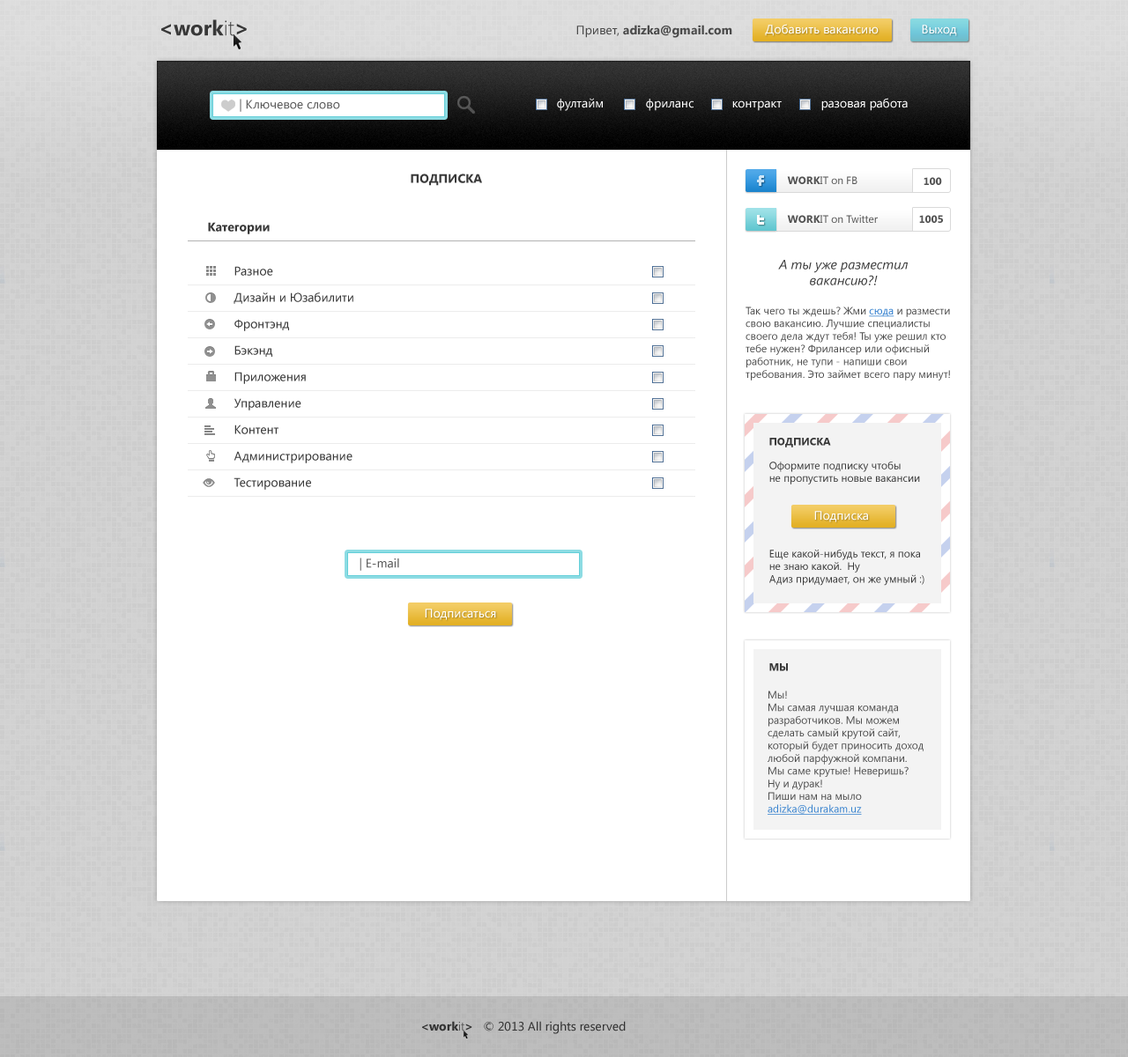
<style>
.page{position:relative;width:1128px;height:1057px;background:#ffffff}
.page>*{position:absolute;margin:0}
.t1{font:21.1px "SegoeUI-Bold";color:#383838}
.t2{font:21.1px "SegoeUI-Light";color:#383838}
.t3{font:12.3px "SegoeUI-Bold";color:#4a4a4a}
.t4{font:12.3px "SegoeUI";color:#4a4a4a}
.t5{font:12.3px "SegoeUI";color:#ffffff}
.t6{font:12.3px "SegoeUI";color:#5c5c5c}
.t7{font:12.3px "SegoeUI";color:#fdfdfd}
.t8{font:12.3px "SegoeUI-Bold";color:#393939}
.t9{font:10.6px "SegoeUI";color:#535353}
.t10{font:10.6px "SegoeUI-Bold";color:#535353}
.t11{font:12.3px "SegoeUI";color:#393939}
.t12{font:13.2px "SegoeUI-Italic";color:#3b3b3b}
.t13{font:10.6px "SegoeUI";color:#4d4d4d}
.t14{font:10.6px "SegoeUI";color:#2a7acc;text-decoration:underline}
.t15{font:10.6px "SegoeUI-Bold";color:#393939}
.t16{font:10.6px "SegoeUI";color:#393939}
.t17{font:10.6px "SegoeUI";color:#3681ce;text-decoration:underline}
.t18{font:12.3px "SegoeUI";color:#333333}
.t19{font:12.3px "SegoeUI-Bold";color:#333333}
.t20{font:12.3px "SegoeUI-Light";color:#333333}
</style>
<div class="page">
<p class="t1" style="left:161px;top:19px;width:86px;height:17px">&lt;work<span class="t2">it</span>&gt;</p>
<p class="t3" style="left:576px;top:25px;width:156px;height:13px"><span class="t4">Привет, </span>adizka@gmail.com</p>
<p class="t5" style="left:765px;top:24px;width:113px;height:12px">Добавить вакансию</p>
<p class="t5" style="left:922px;top:25px;width:35px;height:11px">Выход</p>
<p class="t6" style="left:240px;top:99px;width:100px;height:13px">| Ключевое слово</p>
<p class="t7" style="left:557px;top:98px;width:46px;height:13px">фултайм</p>
<p class="t7" style="left:646px;top:99px;width:47px;height:12px">фриланс</p>
<p class="t7" style="left:732px;top:100px;width:50px;height:11px">контракт</p>
<p class="t7" style="left:821px;top:98px;width:87px;height:13px">разовая работа</p>
<p class="t8" style="left:411px;top:174px;width:71px;height:12px">ПОДПИСКА</p>
<p class="t9" style="left:787px;top:176px;width:70px;height:8px"><span class="t10">WORK</span>IT on FB</p>
<p class="t10" style="left:923px;top:177px;width:19px;height:8px">100</p>
<p class="t9" style="left:787px;top:215px;width:91px;height:8px"><span class="t10">WORK</span>IT on Twitter</p>
<p class="t10" style="left:919px;top:215px;width:24px;height:8px">1005</p>
<p class="t8" style="left:208px;top:222px;width:62px;height:12px">Категории</p>
<p class="t11" style="left:234px;top:266px;width:39px;height:10px">Разное</p>
<p class="t12" style="left:778px;top:260px;width:130px;height:25px;text-align:center">А ты уже разместил<br>вакансию?!</p>
<p class="t11" style="left:233px;top:293px;width:120px;height:11px">Дизайн и Юзабилити</p>
<p class="t13" style="left:745px;top:307px;width:205px;height:74px">Так чего ты ждешь? Жми <span class="t14">сюда</span> и размести свою вакансию. Лучшие специалисты своего дела ждут тебя! Ты уже решил кто тебе нужен? Фрилансер или офисный работник, не тупи - напиши свои требования. Это займет всего пару минут!</p>
<p class="t11" style="left:234px;top:319px;width:55px;height:12px">Фронтэнд</p>
<p class="t11" style="left:234px;top:345px;width:38px;height:12px">Бэкэнд</p>
<p class="t11" style="left:234px;top:372px;width:72px;height:12px">Приложения</p>
<p class="t11" style="left:234px;top:398px;width:67px;height:13px">Управление</p>
<p class="t11" style="left:234px;top:425px;width:44px;height:9px">Контент</p>
<p class="t15" style="left:769px;top:438px;width:62px;height:10px">ПОДПИСКА</p>
<p class="t11" style="left:233px;top:451px;width:119px;height:12px">Администрирование</p>
<p class="t16" style="left:769px;top:461px;width:151px;height:24px">Оформите подписку чтобы <br>не пропустить новые вакансии</p>
<p class="t11" style="left:233px;top:478px;width:78px;height:12px">Тестирование</p>
<p class="t5" style="left:814px;top:511px;width:54px;height:11px">Подписка</p>
<p class="t6" style="left:359px;top:558px;width:40px;height:13px">| E-mail</p>
<p class="t16" style="left:769px;top:549px;width:155px;height:37px">Еще какой-нибудь текст, я пока<br>не знаю какой.  Ну <br>Адиз придумает, он же умный :)</p>
<p class="t5" style="left:425px;top:609px;width:71px;height:11px">Подписаться</p>
<p class="t15" style="left:769px;top:663px;width:19px;height:8px">МЫ</p>
<p class="t13" style="left:767px;top:691px;width:156px;height:124px">Мы!<br>Мы самая лучшая команда<br>разработчиков. Мы можем сделать самый крутой сайт, который будет приносить доход любой парфужной компани.<br>Мы саме крутые! Неверишь?<br>Ну и дурак!<br>Пиши нам на мыло<br><span class="t17">adizka@durakam.uz</span></p>
<p class="t18" style="left:422px;top:1021px;width:204px;height:13px"><span class="t19">&lt;work</span><span class="t20">it</span><span class="t19">&gt;   </span>© 2013 All rights reserved</p>
</div>
